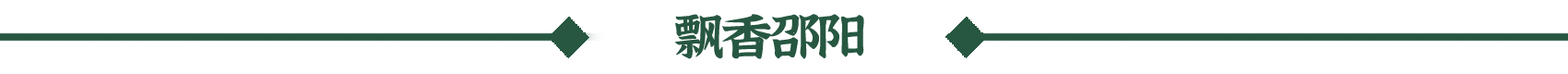
<style>
.page{position:relative;width:1568px;height:74px;background:#ffffff}
.page>*{position:absolute;margin:0}
.t1{font:45.9px "jiangxizhuokai";letter-spacing:-0.09em;color:#275741;font-weight:bold;scale:1.11 1}
</style>
<div class="page">
<p class="t1" style="left:675px;top:14px;width:189px;height:45px">飘香邵阳</p>
</div>
